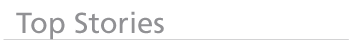
<style>
.page{position:relative;width:349px;height:43px;background:#ffffff}
.page>*{position:absolute;margin:0}
.t1{font:29.2px "Frutiger-Roman";color:#919195}
</style>
<div class="page">
<p class="t1" style="left:16px;top:11px;width:148px;height:29px">Top Stories</p>
</div>
